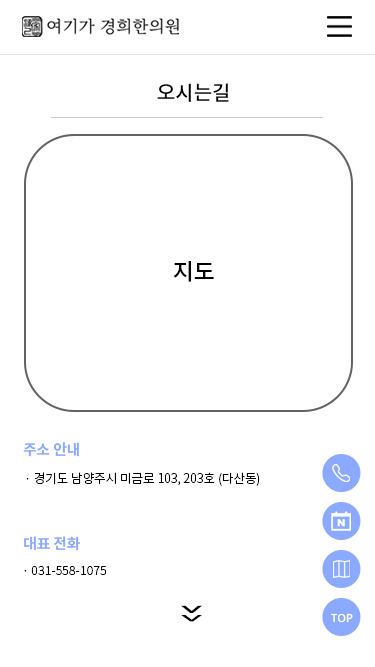
<style>
.page{position:relative;width:375px;height:667px;background:#ffffff}
.page>*{position:absolute;margin:0}
.t1{font:20px "NotoSansKR-Medium";color:#000000}
.t2{font:23px "NotoSansKR-Medium";color:#000000}
.t3{font:14.6px "NotoSansKR-Bold";color:#8aa9ff}
.t4{font:12.5px "NotoSansKR-Light";color:#000000}
.t5{font:55.7px "NotoSansKR-Light";color:#000000;scale:1.27 1}
.t6{font:48.8px "NotoSansKR-Light";color:#000000;scale:1.45 1}
.t7{font:11.1px "NotoSans-Medium";color:#ffffff}
</style>
<div class="page">
<p class="t1" style="left:157px;top:83px;width:72px;height:19px">오시는길</p>
<p class="t2" style="left:173px;top:261px;width:41px;height:21px">지도</p>
<p class="t3" style="left:23px;top:442px;width:56px;height:15px">주소 안내</p>
<p class="t4" style="left:26px;top:472px;width:234px;height:14px">· 경기도 남양주시 미금로 103, 203호 (다산동)</p>
<p class="t3" style="left:24px;top:536px;width:56px;height:15px">대표 전화</p>
<p class="t4" style="left:24px;top:566px;width:83px;height:9px">· 031-558-1075</p>
<p class="t5" style="left:181px;top:605px;width:21px;height:8px;rotate:180deg">＾</p>
<p class="t6" style="left:181px;top:615px;width:21px;height:7px;rotate:180deg">＾</p>
<p class="t7" style="left:331px;top:613px;width:22px;height:10px">TOP</p>
</div>
